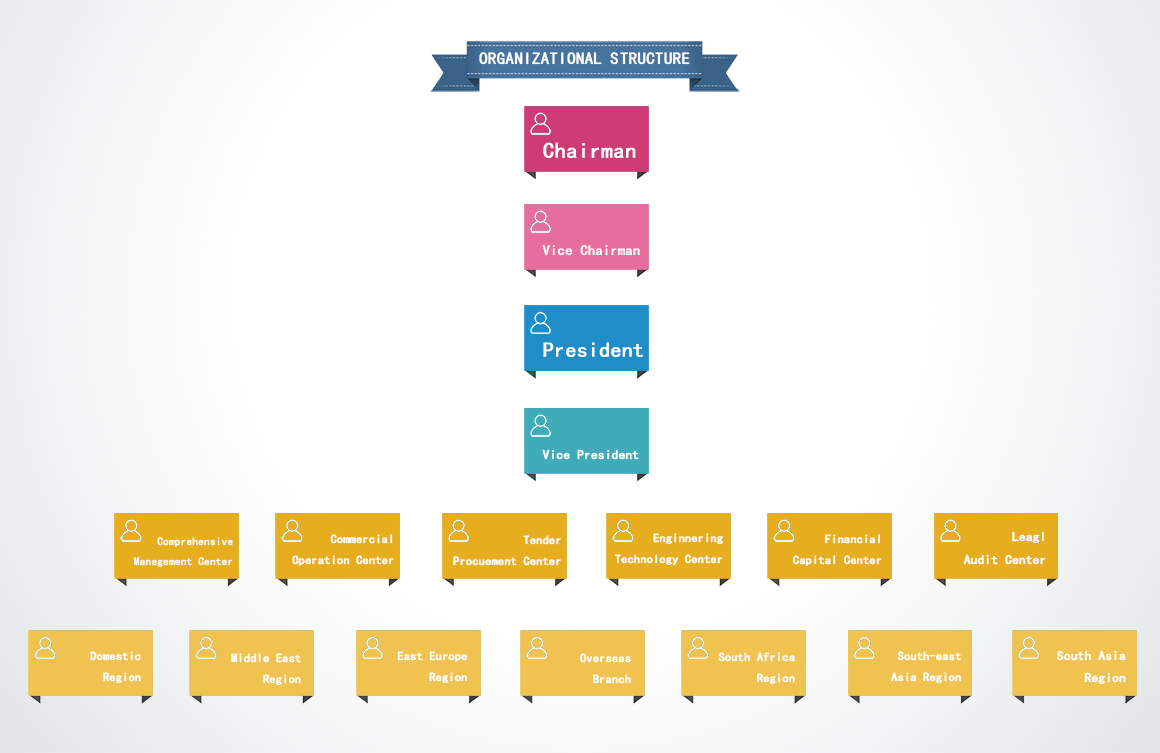
<style>
.page{position:relative;width:1160px;height:753px;background:#ffffff}
.page>*{position:absolute;margin:0}
.t1{font:16.7px "SimHei";color:#ffffff;text-transform:uppercase;font-weight:bold}
.t2{font:22.1px "SimHei";color:#ffffff;font-weight:bold}
.t3{font:14.2px "SimHei";color:#ffffff;font-weight:bold}
.t4{font:21.2px "SimHei";color:#ffffff;font-weight:bold}
.t5{font:13px "SimHei";color:#ffffff;font-weight:bold}
.t6{font:12px "SimHei";color:#ffffff;font-weight:bold}
.t7{font:11px "SimHei";color:#ffffff;font-weight:bold}
</style>
<div class="page">
<p class="t1" style="left:479px;top:52px;width:211px;height:13px">organizational structure</p>
<p class="t2" style="left:543px;top:142px;width:93px;height:16px">Chairman</p>
<p class="t3" style="left:542px;top:244px;width:98px;height:12px">Vice Chairman</p>
<p class="t4" style="left:543px;top:342px;width:100px;height:15px">President</p>
<p class="t5" style="left:542px;top:449px;width:97px;height:11px">Vice President</p>
<p class="t6" style="left:292px;top:534px;width:102px;height:32px;text-align:right">Commercial<br>Operation Center</p>
<p class="t6" style="left:615px;top:533px;width:108px;height:32px;text-align:right">Enginnering<br>Technology Center</p>
<p class="t6" style="left:793px;top:534px;width:89px;height:32px;text-align:right">Financial<br>Capital Center</p>
<p class="t5" style="left:963px;top:531px;width:83px;height:34px;text-align:right">Leagl<br>Audit Center</p>
<p class="t7" style="left:134px;top:537px;width:99px;height:30px;text-align:right">Comprehensive<br>Management Center</p>
<p class="t6" style="left:453px;top:535px;width:108px;height:31px;text-align:right">Tender<br>Procuement Center</p>
<p class="t6" style="left:90px;top:651px;width:51px;height:32px;text-align:right">Domestic<br>Region</p>
<p class="t6" style="left:231px;top:653px;width:70px;height:32px;text-align:right">Middle East<br>Region</p>
<p class="t6" style="left:397px;top:651px;width:70px;height:32px;text-align:right">East Europe<br>Region</p>
<p class="t6" style="left:580px;top:653px;width:51px;height:31px;text-align:right">Overseas<br>Branch</p>
<p class="t6" style="left:718px;top:652px;width:77px;height:32px;text-align:right">South Africa<br>Region</p>
<p class="t6" style="left:891px;top:651px;width:70px;height:32px;text-align:right">South-east<br>Asia Region</p>
<p class="t5" style="left:1057px;top:650px;width:69px;height:34px;text-align:right">South Asia<br>Region</p>
</div>
